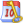
<style>
.page{position:relative;width:23px;height:23px}
.page>*{position:absolute;margin:0}
.t1{font:10px "TimesNewRomanPSMT";color:#c53636;font-weight:bold;font-style:italic;scale:0.9 1}
</style>
<div class="page">
<p class="t1" style="left:5px;top:9px;width:10px;height:8px">10</p>
</div>
